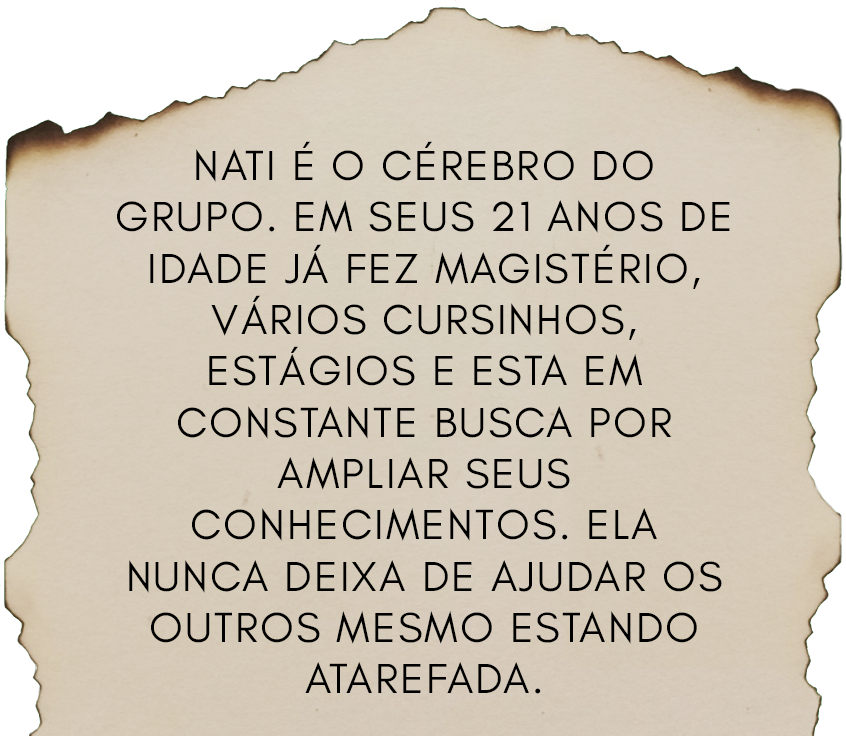
<style>
.page{position:relative;width:846px;height:736px}
.page>*{position:absolute;margin:0}
.t1{font:42.8px "GlacialIndifference-Regular";letter-spacing:0.05em;color:#000000;text-transform:uppercase}
</style>
<div class="page">
<p class="t1" style="left:117px;top:141px;width:613px;height:553px;text-align:center">nati é o cérebro do<br>grupo. em seus 21 anos de<br>idade já fez magistério,<br>vários cursinhos,<br>estágios e esta em<br>constante busca por<br>ampliar seus<br>conhecimentos. ela<br>nunca deixa de ajudar os<br>outros mesmo estando<br>atarefada.</p>
</div>
